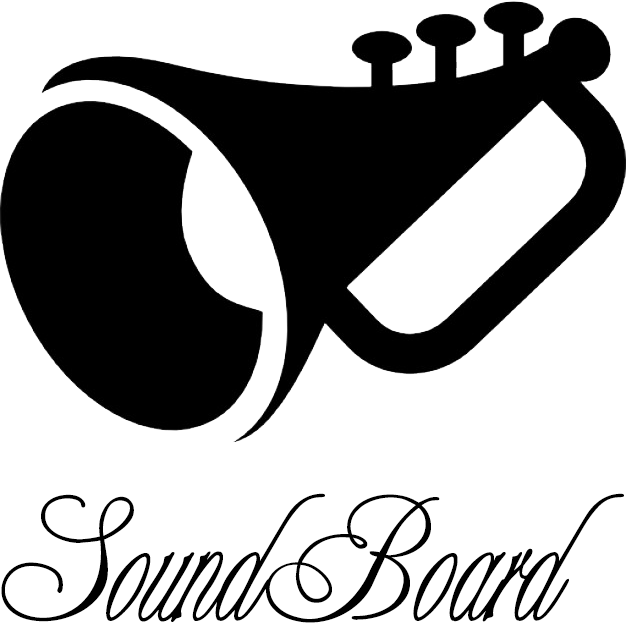
<style>
.page{position:relative;width:626px;height:626px;background:#ffffff}
.page>*{position:absolute;margin:0}
.t1{font:162.2px "AlexeiCopperplateITC-Normal";color:#000000}
</style>
<div class="page">
<p class="t1" style="left:1px;top:493px;width:623px;height:130px">SoundBoard</p>
</div>
